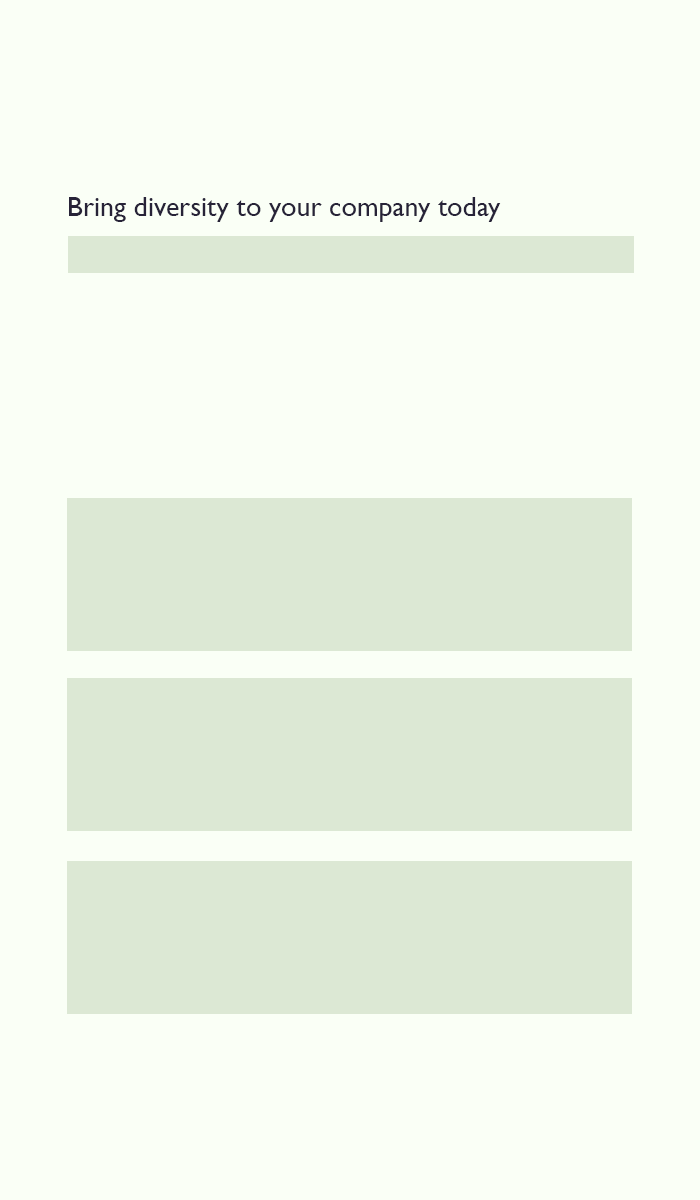
<style>
.page{position:relative;width:700px;height:1200px;background:#fafff6}
.page>*{position:absolute;margin:0}
.t1{font:28px "GillSansMT";color:#272338}
</style>
<div class="page">
<p class="t1" style="left:69px;top:197px;width:432px;height:25px">Bring diversity to your company today</p>
</div>
